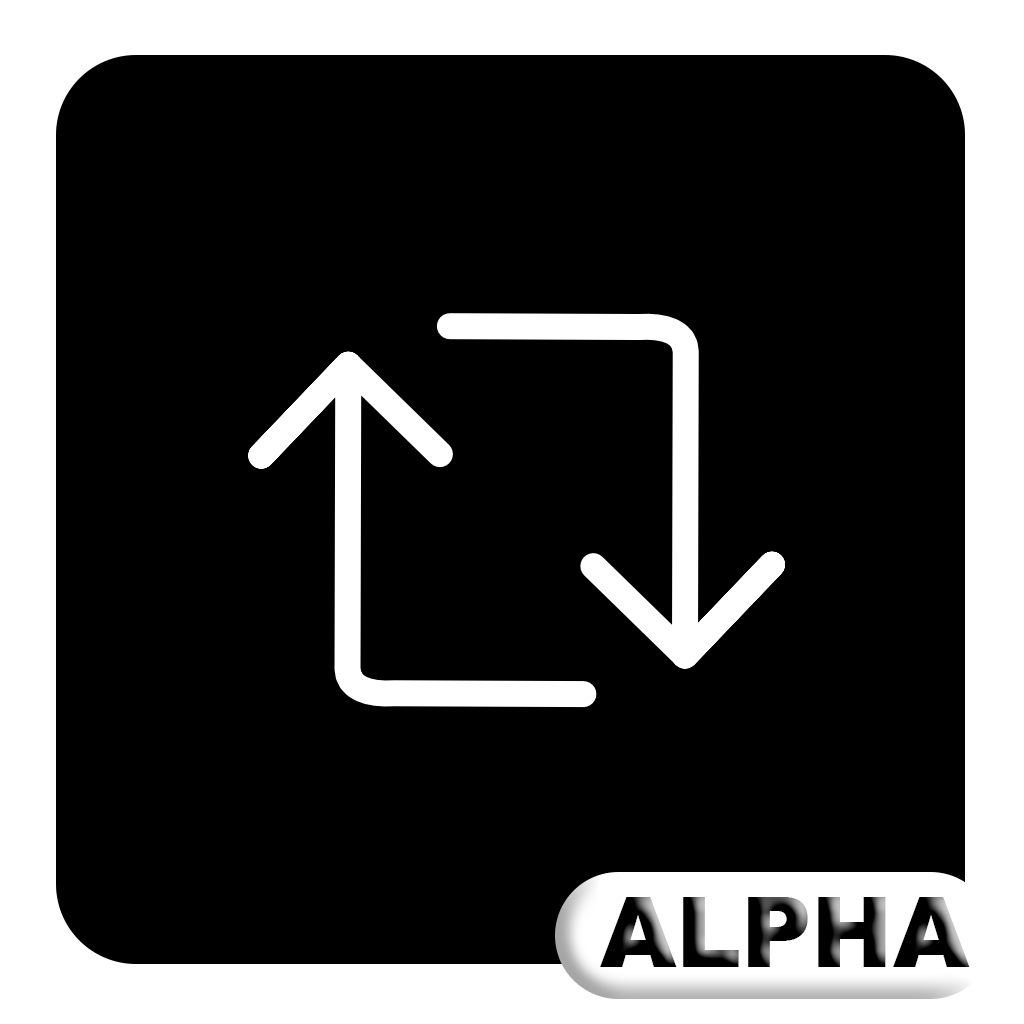
<style>
.page{position:relative;width:1024px;height:1024px;background:#000000}
.page>*{position:absolute;margin:0}
.t1{font:97.6px "Arial-Black";color:#000000}
</style>
<div class="page">
<p class="t1" style="left:600px;top:897px;width:370px;height:70px">ALPHA</p>
</div>
